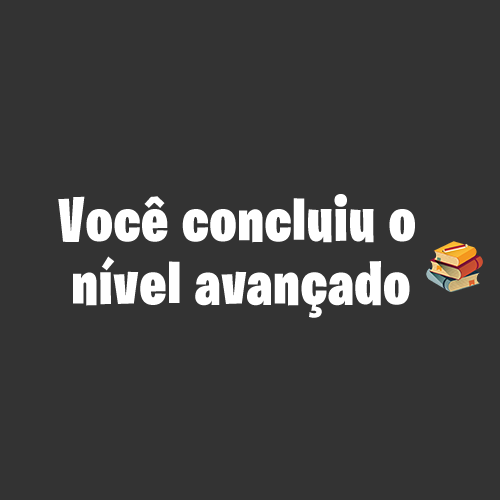
<style>
.page{position:relative;width:500px;height:500px;background:#333333}
.page>*{position:absolute;margin:0}
.t1{font:63px/63.3px "BurbankBigCondensed-Black";letter-spacing:0.025em;color:#ffffff;scale:0.95 1}
.t2{font:63px/63.3px "BurbankBigCondensed-Black";letter-spacing:0.025em;color:#060007;scale:0.95 1}
</style>
<div class="page">
<p class="t1" style="left:58px;top:194px;width:357px;height:124px"><span class="t2">   </span>Você concluiu o<br>    nível avançado</p>
</div>
